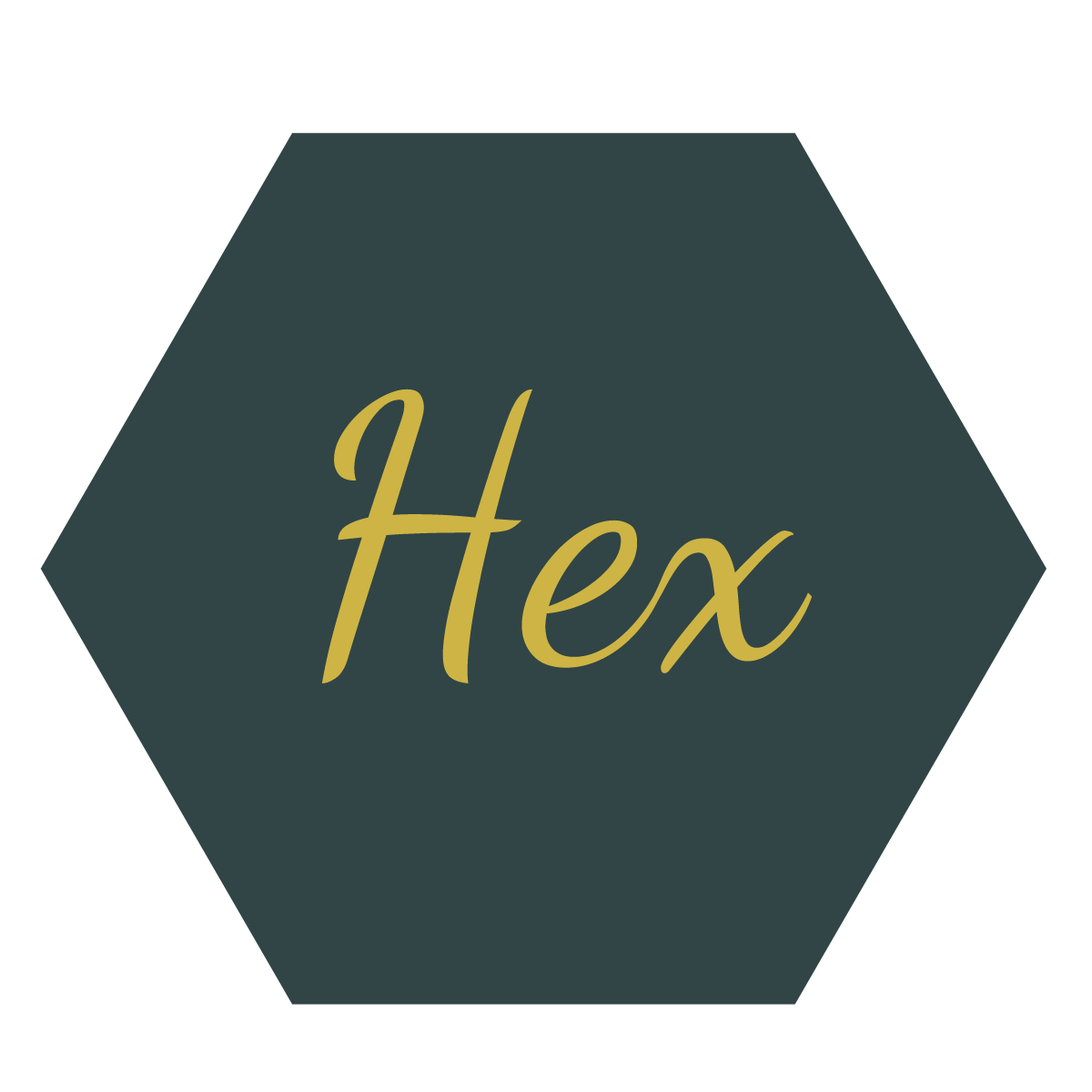
<style>
.page{position:relative;width:1092px;height:1092px;background:#314546}
.page>*{position:absolute;margin:0}
.t1{font:364px "DancingScript";color:#cdb444}
</style>
<div class="page">
<p class="t1" style="left:321px;top:389px;width:491px;height:294px">Hex</p>
</div>
